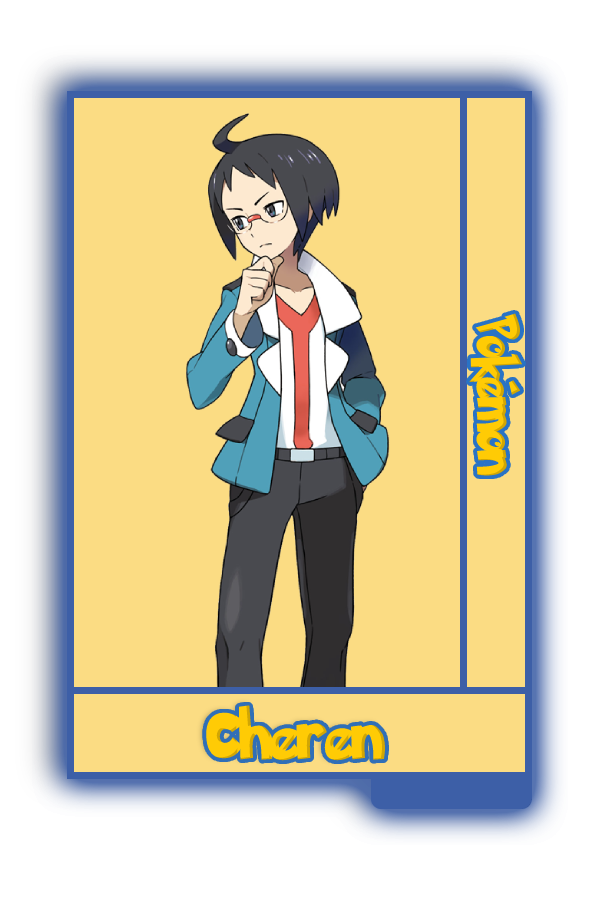
<style>
.page{position:relative;width:600px;height:900px;background:#fbdc83}
.page>*{position:absolute;margin:0}
.t1{font:48.8px "PokemonSolidNormal";color:#ffcb05;scale:0.8 1}
.t2{font:56.6px "PokemonSolidNormal";color:#ffcb05;scale:0.92 1}
</style>
<div class="page">
<p class="t1" style="left:469px;top:313px;width:54px;height:163px;rotate:90deg">Pokémon</p>
<p class="t2" style="left:206px;top:705px;width:180px;height:56px">Cheren</p>
</div>
